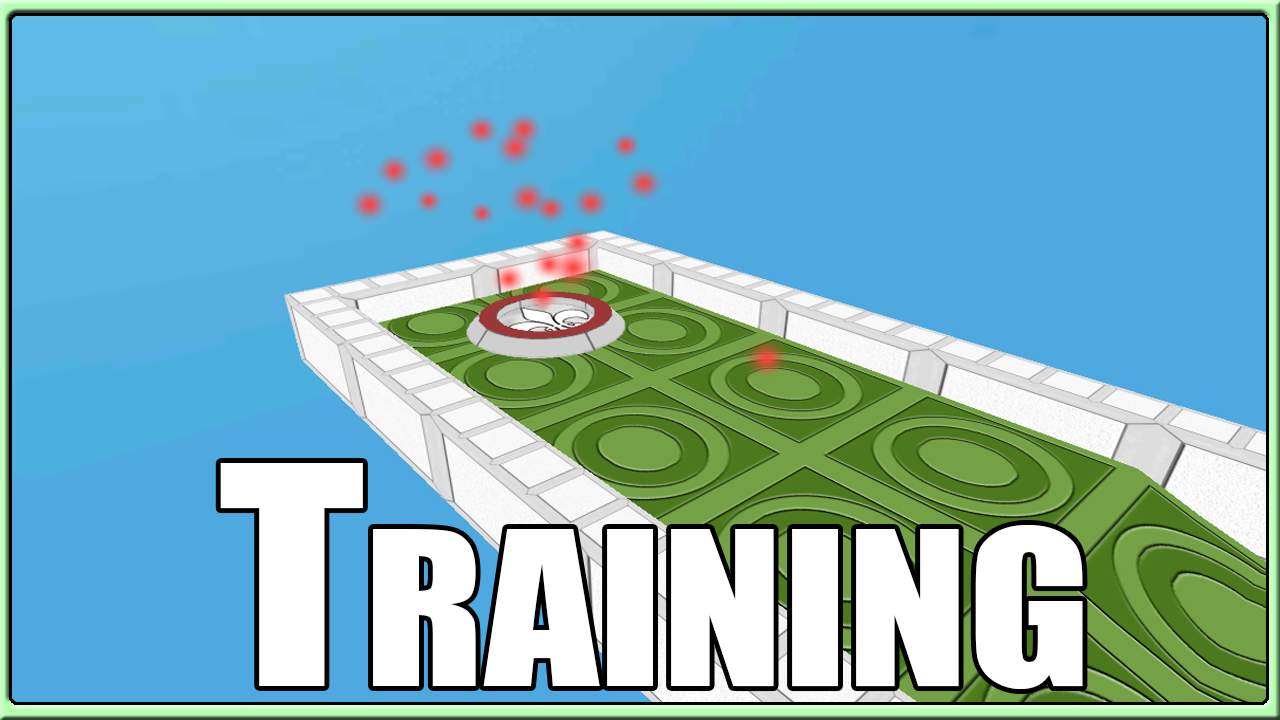
<style>
.page{position:relative;width:1280px;height:720px;background:#4da9e0}
.page>*{position:absolute;margin:0}
.t1{font:199.4px "Impact";color:#ffffff;scale:1.12 1}
.t2{font:282.3px "Impact";color:#ffffff;scale:1.12 1}
</style>
<div class="page">
<p class="t1" style="left:220px;top:463px;width:863px;height:226px"><span class="t2">T</span>RAINING</p>
</div>
